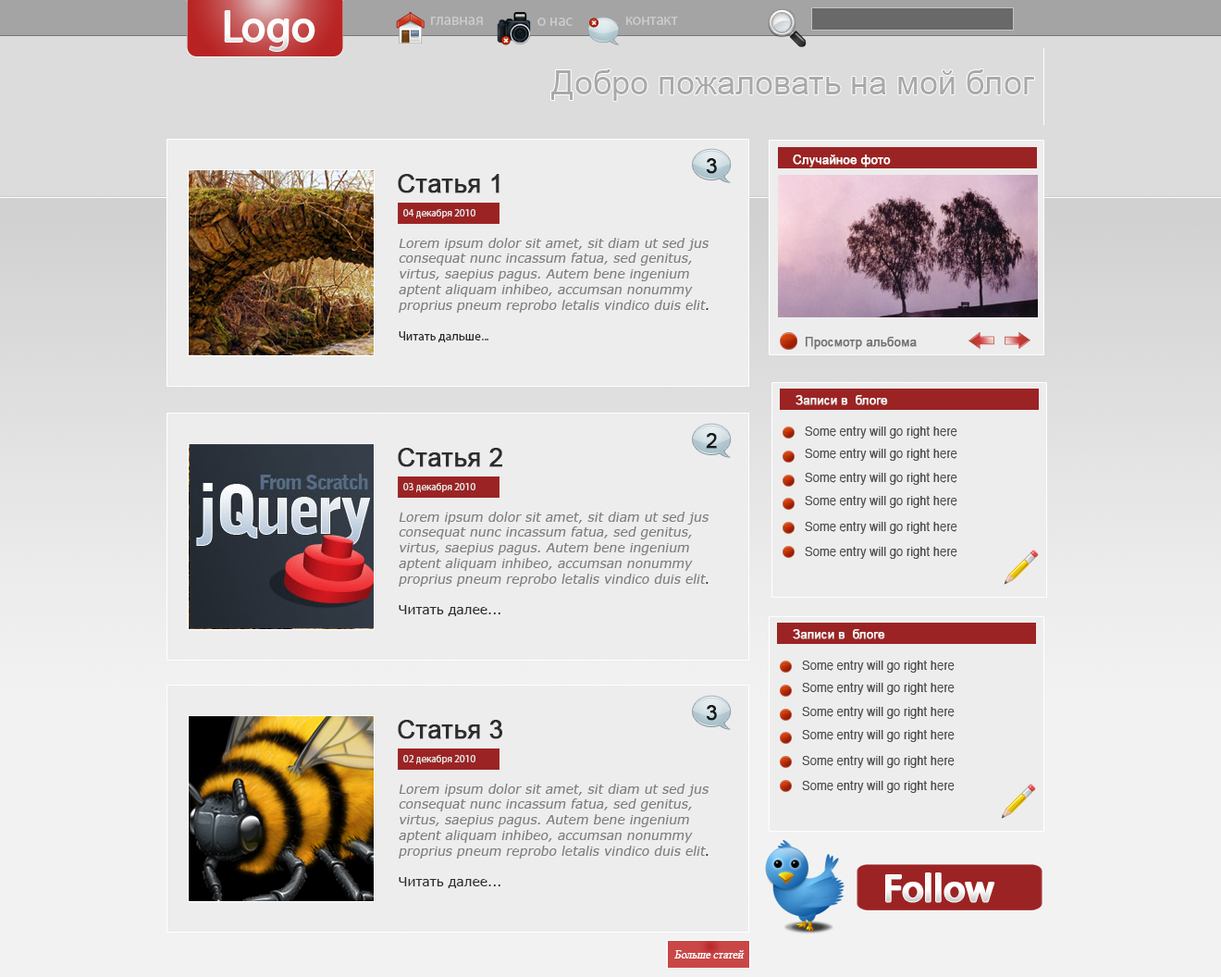
<style>
.page{position:relative;width:1221px;height:977px;background:#ededed}
.page>*{position:absolute;margin:0}
.t1{font:44.4px "MyriadPro-Regular";color:#ffffff}
.t2{font:15.7px "MyriadPro-Regular";color:#cbcbcb}
.t3{font:33.3px "ArialMT";color:#a9a9a9}
.t4{font:20.3px "ArialMT";color:#1a1a1a;font-weight:bold}
.t5{font:12px "ArialMT";color:#ffffff;font-weight:bold}
.t6{font:25px "ArialMT";color:#2d2d2d;font-weight:bold}
.t7{font:10.2px "MyriadPro-Regular";color:#e1e1e1}
.t8{font:12.9px "Verdana";color:#7e7e7e;font-style:italic}
.t9{font:12.9px "Verdana";color:#2d2d2d;font-style:italic}
.t10{font:12.9px "MyriadPro-Regular";color:#2d2d2d}
.t11{font:12px "ArialMT";color:#737373;font-weight:bold}
.t12{font:12.9px "Verdana";color:#2d2d2d}
.t13{font:38px "MyriadPro-Regular";color:#ffffff;font-weight:bold}
.t14{font:11.1px "TimesNewRomanPSMT";color:#ffffff;font-style:italic}
</style>
<div class="page">
<p class="t1" style="left:225px;top:11px;width:89px;height:40px">Logo</p>
<p class="t2" style="left:431px;top:17px;width:52px;height:8px">главная</p>
<p class="t2" style="left:537px;top:18px;width:36px;height:8px">о нас</p>
<p class="t2" style="left:626px;top:17px;width:52px;height:8px">контакт</p>
<p class="t3" style="left:551px;top:69px;width:483px;height:32px">Добро пожаловать на мой блог</p>
<p class="t4" style="left:707px;top:158px;width:10px;height:16px">3</p>
<p class="t5" style="left:793px;top:154px;width:98px;height:13px">Случайное фото</p>
<p class="t6" style="left:398px;top:174px;width:101px;height:19px">Статья 1</p>
<p class="t7" style="left:403px;top:209px;width:72px;height:9px">04 декабря 2010</p>
<p class="t8" style="left:399px;top:238px;width:310px;height:104px">Lorem ipsum dolor sit amet, sit diam ut sed jus consequat nunc incassum fatua, sed genitus, virtus, saepius pagus. Autem bene ingenium aptent aliquam inhibeo, accumsan nonummy proprius pneum reprobo letalis vindico duis elit<span class="t9">.<br></span><span class="t10"><br>Читать дальше...</span></p>
<p class="t11" style="left:805px;top:337px;width:112px;height:13px">Просмотр альбома</p>
<p class="t5" style="left:795px;top:395px;width:93px;height:10px">Записи в  блоге</p>
<p class="t4" style="left:706px;top:433px;width:11px;height:16px">2</p>
<p class="t6" style="left:398px;top:448px;width:104px;height:19px">Статья 2</p>
<p class="t7" style="left:403px;top:483px;width:72px;height:9px">03 декабря 2010</p>
<p class="t8" style="left:399px;top:511px;width:310px;height:105px">Lorem ipsum dolor sit amet, sit diam ut sed jus consequat nunc incassum fatua, sed genitus, virtus, saepius pagus. Autem bene ingenium aptent aliquam inhibeo, accumsan nonummy proprius pneum reprobo letalis vindico duis elit<span class="t12">.<br><br>Читать далее...</span></p>
<p class="t5" style="left:793px;top:629px;width:92px;height:10px">Записи в  блоге</p>
<p class="t4" style="left:707px;top:705px;width:10px;height:16px">3</p>
<p class="t6" style="left:398px;top:720px;width:104px;height:19px">Статья 3</p>
<p class="t7" style="left:403px;top:755px;width:72px;height:9px">02 декабря 2010</p>
<p class="t8" style="left:399px;top:783px;width:310px;height:105px">Lorem ipsum dolor sit amet, sit diam ut sed jus consequat nunc incassum fatua, sed genitus, virtus, saepius pagus. Autem bene ingenium aptent aliquam inhibeo, accumsan nonummy proprius pneum reprobo letalis vindico duis elit<span class="t12">.<br><br>Читать далее...</span></p>
<p class="t13" style="left:886px;top:873px;width:108px;height:29px">Follow</p>
<p class="t14" style="left:674px;top:950px;width:71px;height:8px">Больше статей</p>
</div>
